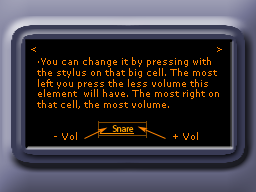
<style>
.page{position:relative;width:256px;height:192px;background:#000000}
.page>*{position:absolute;margin:0}
.t1{font:9px "MSReferenceSansSerif";color:#ff8400}
</style>
<div class="page">
<p class="t1" style="left:31px;top:47px;width:5px;height:5px">&lt;</p>
<p class="t1" style="left:217px;top:47px;width:5px;height:5px">&gt;</p>
<p class="t1" style="left:37px;top:57px;width:182px;height:52px">·You can change it by pressing with <br>the stylus on that big cell. The most <br>left you press the less volume this <br>element  will have. The most right on <br>that cell, the most volume.</p>
<p class="t1" style="left:54px;top:132px;width:23px;height:8px">- Vol</p>
<p class="t1" style="left:173px;top:132px;width:25px;height:8px">+ Vol</p>
</div>
